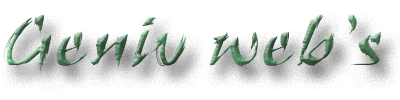
<style>
.page{position:relative;width:400px;height:100px;background:#ffffff}
.page>*{position:absolute;margin:0}
.t1{font:75px "RuachLetPlain";letter-spacing:0.05em}
</style>
<div class="page">
<p class="t1" style="left:3px;top:14px;width:378px;height:57px">Geniv web’s</p>
</div>
